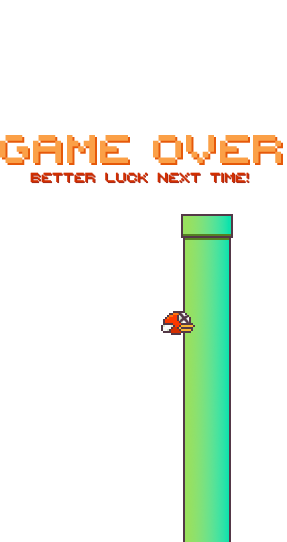
<style>
.page{position:relative;width:287px;height:542px;background:#ffffff}
.page>*{position:absolute;margin:0}
.t1{font:57.2px "PIXY";color:#fba047}
.t2{font:18.9px "PIXY";letter-spacing:-0.01em;color:#d32f00}
</style>
<div class="page">
<p class="t1" style="left:0px;top:135px;width:281px;height:28px">Game Over</p>
<p class="t2" style="left:30px;top:172px;width:219px;height:11px">BETTER LUCK NEXT TIME!</p>
</div>
